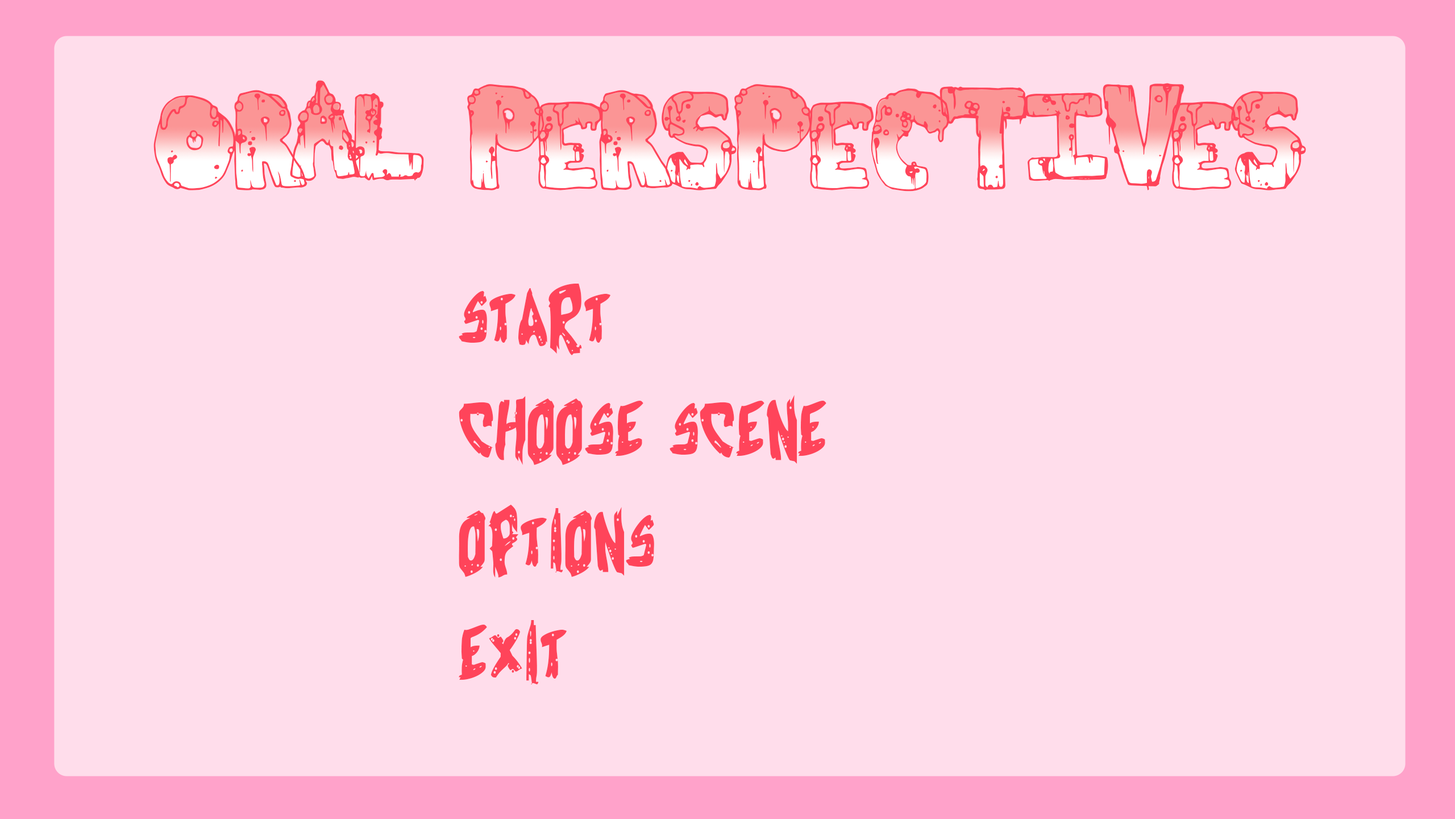
<style>
.page{position:relative;width:1455px;height:819px;background:#ffddeb}
.page>*{position:absolute;margin:0}
.t1{font:191.9px "ToxicWaste";color:#ff445a}
.t2{font:113.7px/112px "CyrustheVirus";color:#ff445a}
</style>
<div class="page">
<p class="t1" style="left:154px;top:80px;width:1153px;height:112px">oral Perspectives</p>
<p class="t2" style="left:459px;top:284px;width:368px;height:401px">Start<br>Choose Scene<br>Options<br>Exit</p>
</div>
